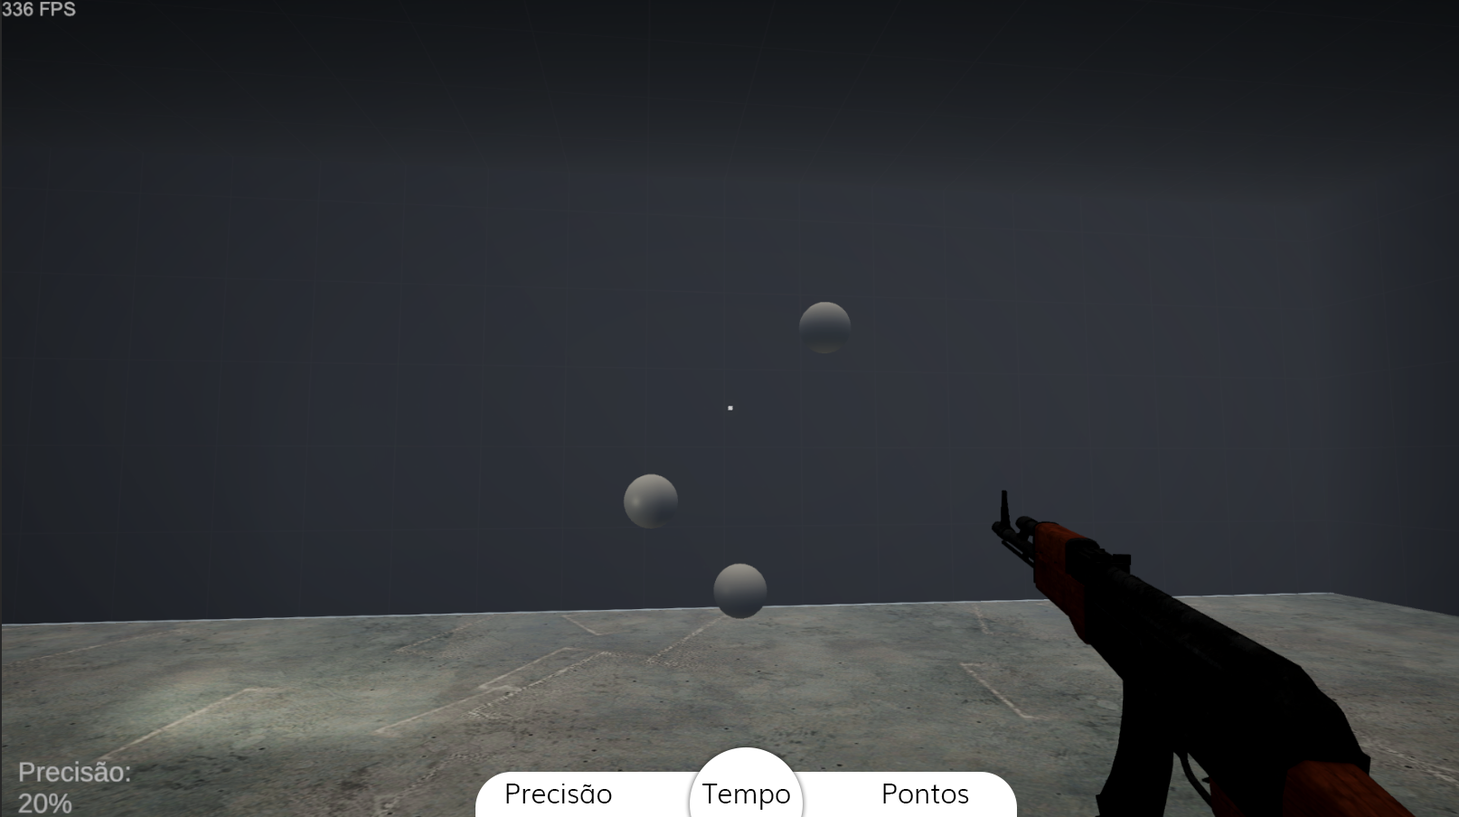
<style>
.page{position:relative;width:1459px;height:817px}
.page>*{position:absolute;margin:0}
.t1{font:27.1px "Muli-Light";color:#000000}
</style>
<div class="page">
<p class="t1" style="left:506px;top:784px;width:106px;height:20px">Precisão</p>
<p class="t1" style="left:702px;top:784px;width:88px;height:26px">Tempo</p>
<p class="t1" style="left:883px;top:784px;width:86px;height:20px">Pontos</p>
</div>
